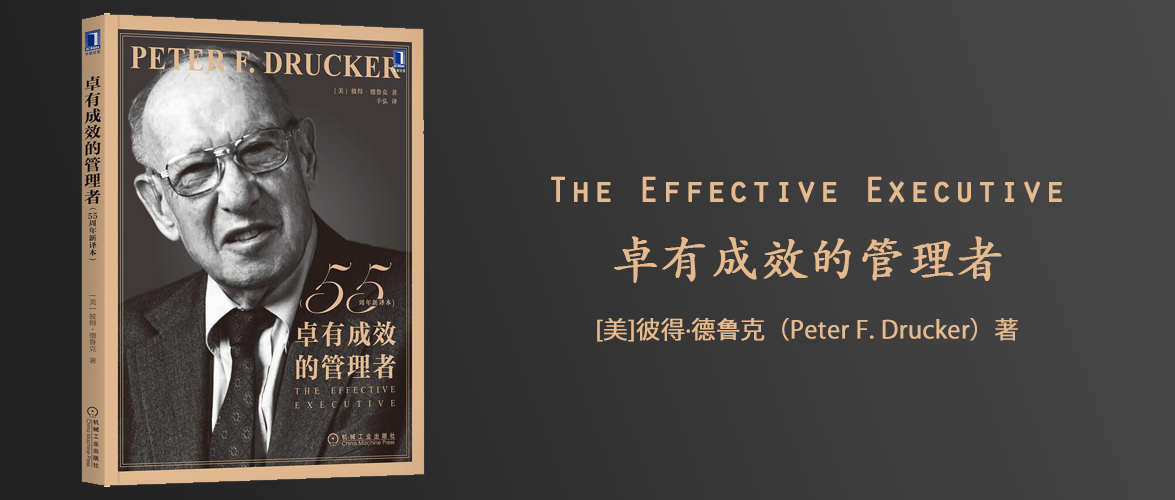
<style>
.page{position:relative;width:1175px;height:500px}
.page>*{position:absolute;margin:0}
.t1{font:36px "OratorStd";color:#e6ba8f;font-weight:bold}
.t2{font:48px "STKaiti";color:#e6ba8f;font-weight:bold}
.t3{font:24px "KozGoPr6N-Regular";color:#e6ba8f;font-weight:bold}
.t4{font:24px "AdobeHeitiStd-Regular";color:#e6ba8f;font-weight:bold}
</style>
<div class="page">
<p class="t1" style="left:551px;top:176px;width:511px;height:27px">The Effective Executive</p>
<p class="t2" style="left:614px;top:236px;width:388px;height:47px">卓有成效的管理者</p>
<p class="t3" style="left:597px;top:317px;width:421px;height:25px">[美]彼得·德<span class="t4">鲁</span>克（Peter F. Drucker）著</p>
</div>
